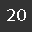
<style>
.page{position:relative;width:32px;height:32px;background:#333333}
.page>*{position:absolute;margin:0}
.t1{font:17.8px "MyriadPro-Regular";color:#ffffff;scale:1.12 1}
</style>
<div class="page">
<p class="t1" style="left:7px;top:9px;width:19px;height:12px">20</p>
</div>
